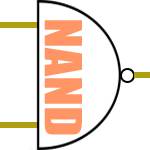
<style>
.page{position:relative;width:150px;height:150px;background:#ffffff}
.page>*{position:absolute;margin:0}
.t1{font:47.4px "Impact";color:#ff9564;scale:1.17 1}
</style>
<div class="page">
<p class="t1" style="left:44px;top:20px;width:38px;height:115px;rotate:90deg">NAND</p>
</div>
